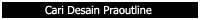
<style>
.page{position:relative;width:200px;height:20px;background:#000000}
.page>*{position:absolute;margin:0}
.t1{font:11px "Tahoma";color:#ffffff}
</style>
<div class="page">
<p class="t1" style="left:45px;top:5px;width:107px;height:10px">Cari Desain Praoutline</p>
</div>
